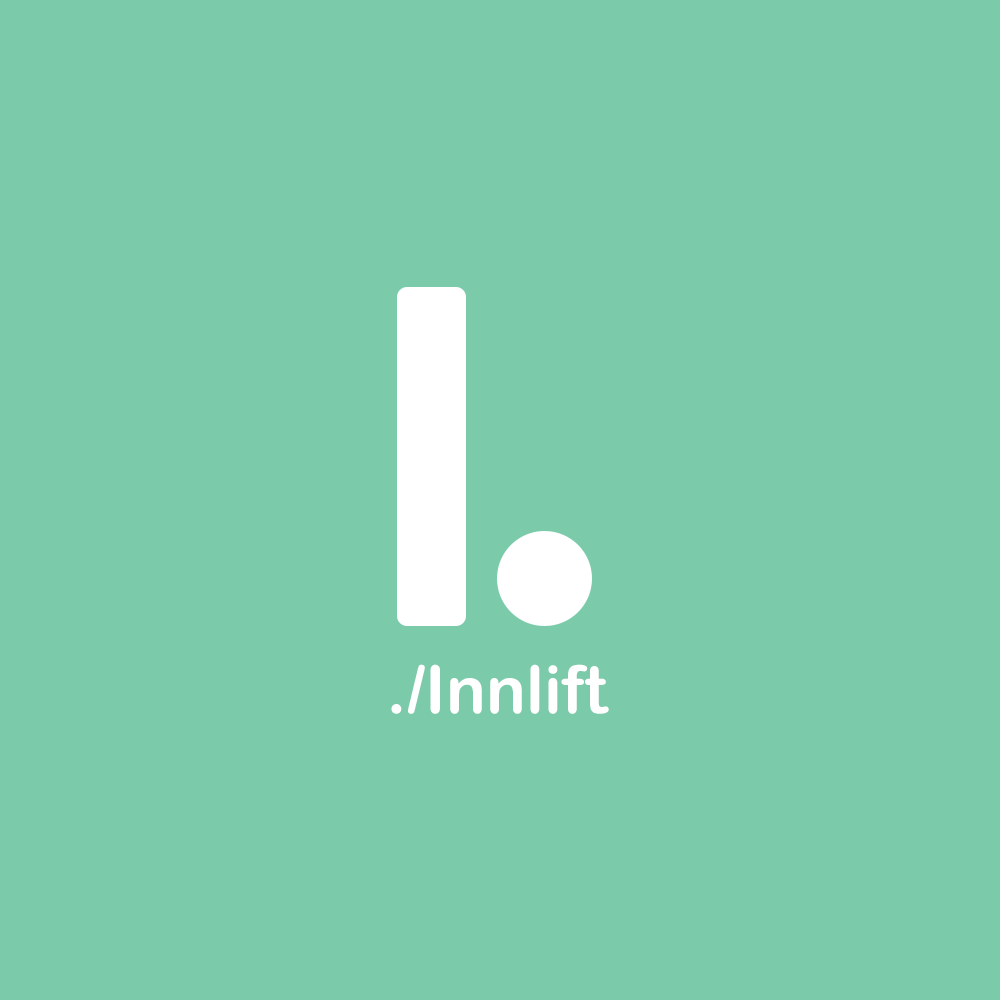
<style>
.page{position:relative;width:1000px;height:1000px;background:#7bcbaa}
.page>*{position:absolute;margin:0}
.t1{font:66.3px "ArialRoundedMTBold";color:#ffffff}
</style>
<div class="page">
<p class="t1" style="left:391px;top:664px;width:218px;height:50px">./Innlift</p>
</div>
